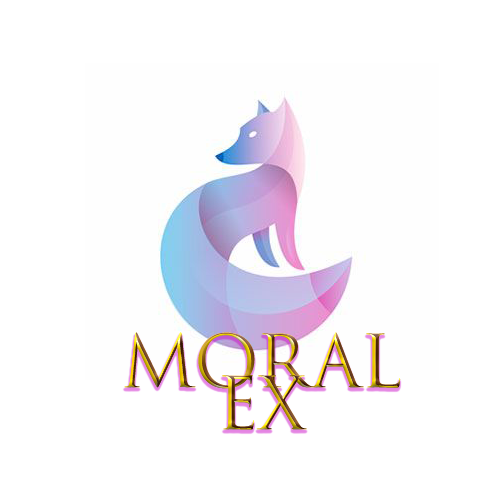
<style>
.page{position:relative;width:500px;height:500px;background:#ffffff}
.page>*{position:absolute;margin:0}
.t1{font:70.8px "TrajanColor-Concept";letter-spacing:-0.053em;font-weight:bold;font-style:italic}
</style>
<div class="page">
<p class="t1" style="left:124px;top:332px;width:277px;height:98px">Moralex</p>
</div>
